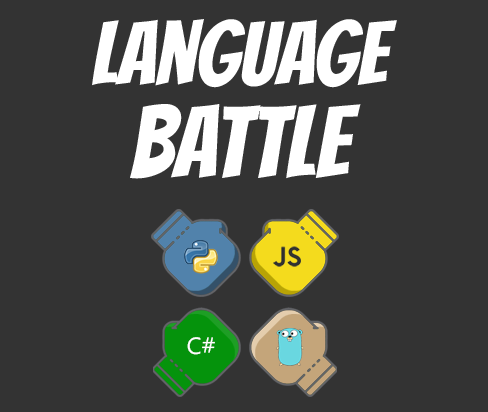
<style>
.page{position:relative;width:488px;height:412px;background:#333333}
.page>*{position:absolute;margin:0}
.t1{font:88px "Bangers-Regular";color:#ffffff}
.t2{font:100px "Bangers-Regular";color:#ffffff}
.t3{font:23.6px "SegoeUI";color:#ffffff}
</style>
<div class="page">
<p class="t1" style="left:92px;top:19px;width:305px;height:69px">Language</p>
<p class="t2" style="left:130px;top:104px;width:231px;height:75px">Battle</p>
<p class="t3" style="left:187px;top:337px;width:28px;height:18px">C#</p>
</div>
